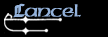
<style>
.page{position:relative;width:108px;height:37px;background:#000000}
.page>*{position:absolute;margin:0}
.t1{font:18px "Celtic-Normal";color:#94b2da}
.t2{font:18px "CathedralExtendedNormal";color:#94b2da}
</style>
<div class="page">
<p class="t1" style="left:13px;top:3px;width:68px;height:15px"><span class="t2">C</span>ancel</p>
</div>
